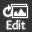
<style>
.page{position:relative;width:32px;height:32px;background:#333333}
.page>*{position:absolute;margin:0}
.t1{font:12px "Amira-Roman";color:#ffffff}
</style>
<div class="page">
<p class="t1" style="left:6px;top:20px;width:20px;height:10px">Edit</p>
</div>
